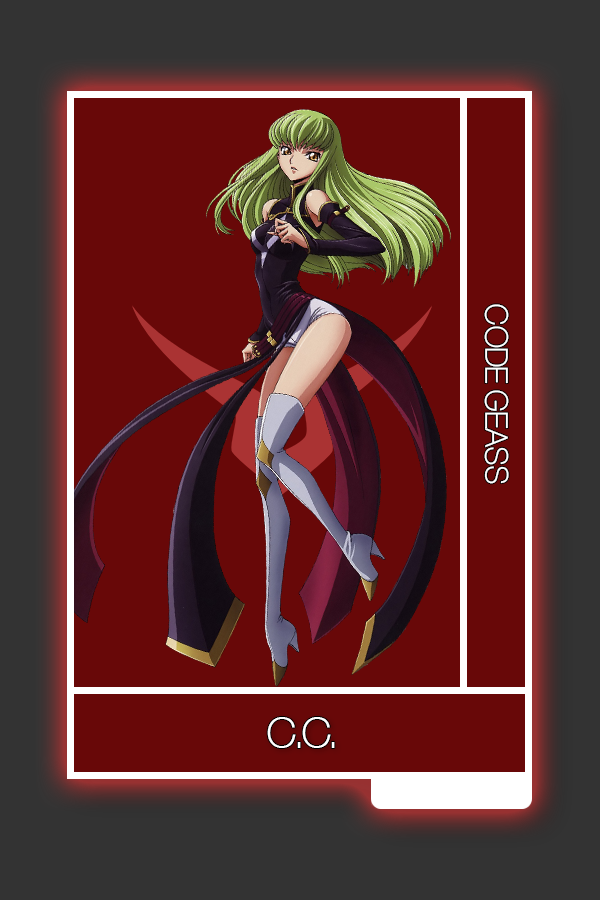
<style>
.page{position:relative;width:600px;height:900px;background:#680808}
.page>*{position:absolute;margin:0}
.t1{font:31.2px "Aliquam";color:#ffffff}
.t2{font:43.2px "Aliquam";color:#ffffff}
</style>
<div class="page">
<p class="t1" style="left:484px;top:304px;width:25px;height:180px;rotate:90deg">CODE GEASS</p>
<p class="t2" style="left:267px;top:717px;width:68px;height:31px">C.C.</p>
</div>
